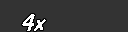
<style>
.page{position:relative;width:128px;height:32px;background:#333333}
.page>*{position:absolute;margin:0}
.t1{font:26px "DomDiagonalBT-Regular";color:#ffffff;scale:1.1 1}
</style>
<div class="page">
<p class="t1" style="left:22px;top:14px;width:24px;height:17px">4x</p>
</div>
